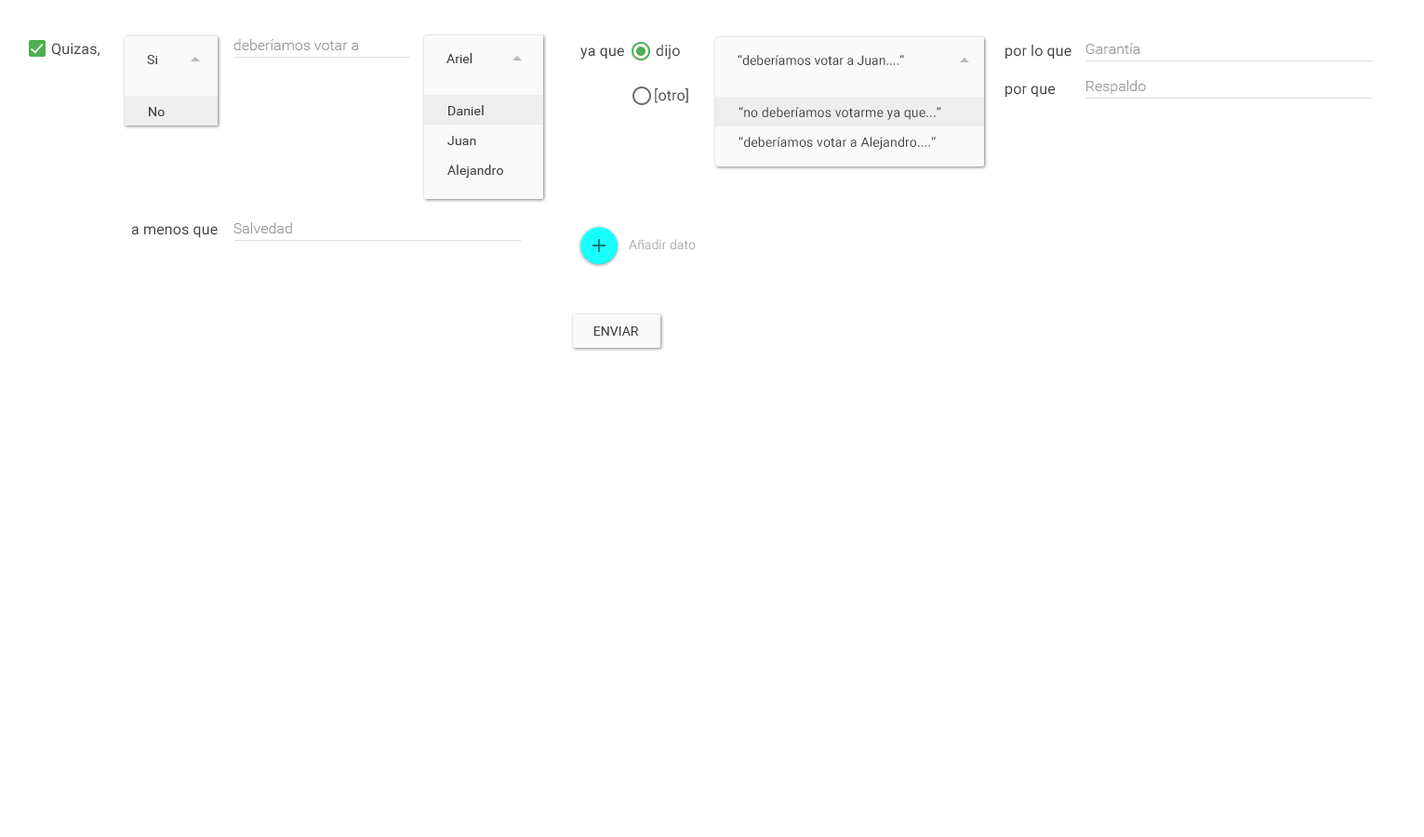
<style>
.page{position:relative;width:1424px;height:837px;background:#ffffff}
.page>*{position:absolute;margin:0}
.t1{font:14.9px "Roboto-Light";color:#999999}
.t2{font:14.9px "Roboto-Regular";letter-spacing:0.01em;color:#444444}
.t3{font:13px "Roboto-Regular";color:#444444}
.t4{font:13px "Roboto-Regular";letter-spacing:0.01em;color:#444444}
.t5{font:13px "Roboto-Regular";color:#b0b0b0}
</style>
<div class="page">
<p class="t1" style="left:233px;top:39px;width:126px;height:11px">deberíamos votar a</p>
<p class="t2" style="left:51px;top:43px;width:49px;height:14px">Quizas,</p>
<p class="t3" style="left:447px;top:53px;width:26px;height:10px">Ariel</p>
<p class="t2" style="left:580px;top:47px;width:44px;height:13px">ya que</p>
<p class="t2" style="left:656px;top:45px;width:24px;height:15px">dijo</p>
<p class="t2" style="left:1006px;top:45px;width:66px;height:15px">por lo que</p>
<p class="t1" style="left:1086px;top:43px;width:55px;height:11px">Garantía</p>
<p class="t3" style="left:147px;top:55px;width:11px;height:9px">Si</p>
<p class="t3" style="left:738px;top:55px;width:166px;height:10px">“deberíamos votar a Juan....”</p>
<p class="t2" style="left:655px;top:88px;width:33px;height:15px">[otro]</p>
<p class="t2" style="left:1006px;top:86px;width:50px;height:12px">por que</p>
<p class="t1" style="left:1087px;top:80px;width:59px;height:14px">Respaldo</p>
<p class="t4" style="left:149px;top:107px;width:16px;height:9px">No</p>
<p class="t4" style="left:448px;top:105px;width:36px;height:10px">Daniel</p>
<p class="t4" style="left:739px;top:107px;width:202px;height:13px">“no deberíamos votarme ya que...”</p>
<p class="t4" style="left:447px;top:136px;width:29px;height:9px">Juan</p>
<p class="t4" style="left:739px;top:137px;width:197px;height:13px">“deberíamos votar a Alejandro....”</p>
<p class="t4" style="left:447px;top:165px;width:56px;height:13px">Alejandro</p>
<p class="t2" style="left:131px;top:226px;width:87px;height:12px">a menos que</p>
<p class="t1" style="left:233px;top:222px;width:59px;height:11px">Salvedad</p>
<p class="t5" style="left:629px;top:239px;width:67px;height:11px">Añadir dato</p>
<p class="t3" style="left:594px;top:327px;width:45px;height:9px">ENVIAR</p>
</div>
